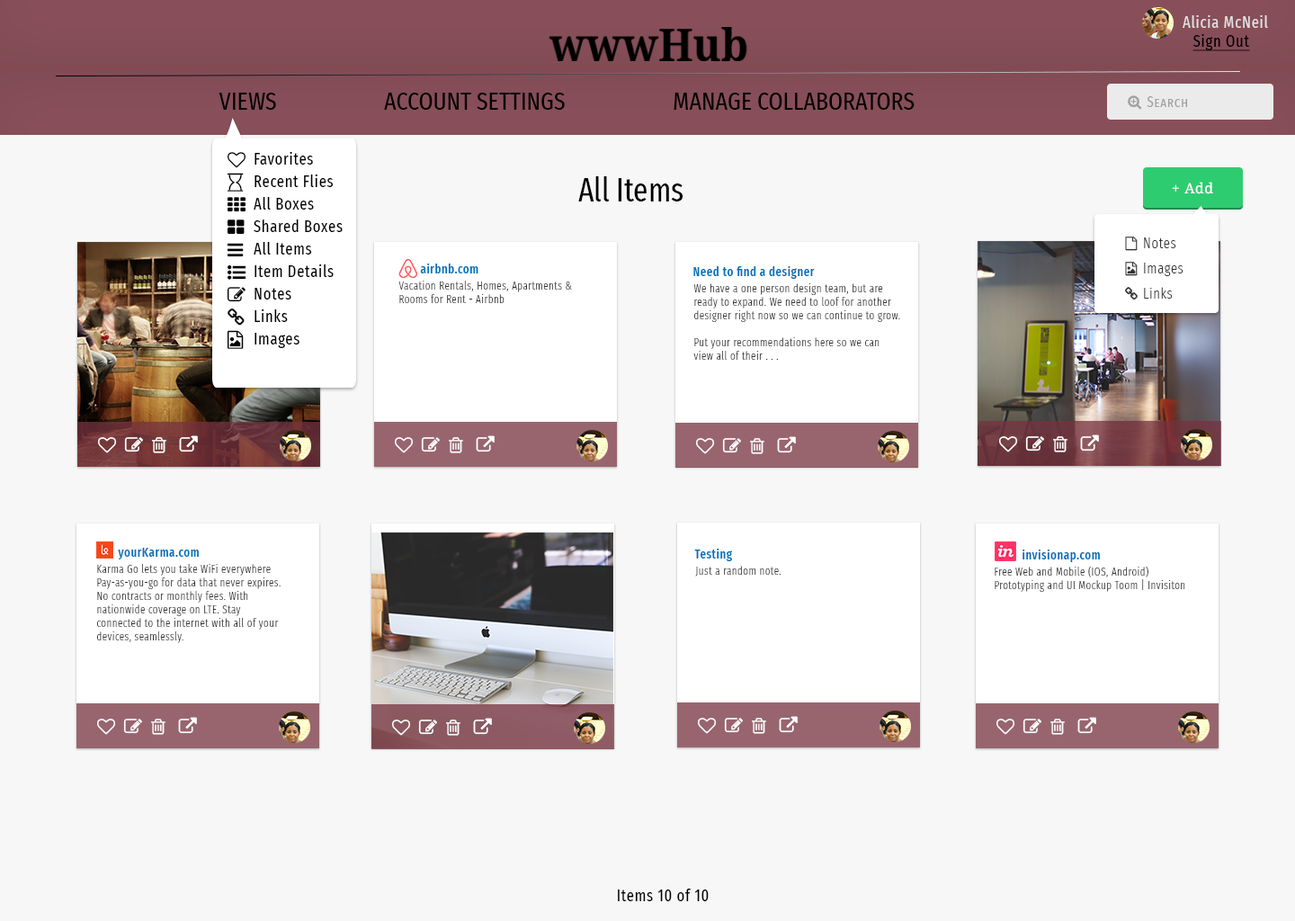
<style>
.page{position:relative;width:1295px;height:921px;background:#f7f7f7}
.page>*{position:absolute;margin:0}
.t1{font:16.2px "FiraSansExtraCondensed-Regular";letter-spacing:0.04em;color:#e2e2e2}
.t2{font:16.2px "FiraSansExtraCondensed-Regular";letter-spacing:0.04em;color:#000000;text-decoration:underline}
.t3{font:25.2px "FiraSansExtraCondensed-Regular";color:#000000;text-transform:uppercase}
.t4{font:14.4px "FiraSansExtraCondensed-Regular";letter-spacing:0.04em;color:#a1a1a1;font-variant:small-caps}
.t5{font:16.2px/22.5px "FiraSansExtraCondensed-Regular";letter-spacing:0.04em;color:#000000}
.t6{font:32.4px "FiraSansExtraCondensed-Regular";color:#000000}
.t7{font:14.4px "DroidSerif";letter-spacing:0.04em;color:#ffffff}
.t8{font:14.4px/25.2px "FiraSansExtraCondensed-Light";letter-spacing:0.04em;color:#333333}
.t9{font:12.6px "FiraSansExtraCondensed-Medium";letter-spacing:0.04em;color:#0072bc}
.t10{font:10.8px/13.5px "FiraSansExtraCondensed-Light";letter-spacing:0.04em;color:#333333}
.t11{font:10.8px "FiraSansExtraCondensed-Light";letter-spacing:0.04em;color:#333333}
.t12{font:16.2px "FiraSansExtraCondensed-Regular";letter-spacing:0.04em;color:#000000}
</style>
<div class="page">
<p class="t1" style="left:1183px;top:15px;width:85px;height:13px">Alicia McNeil</p>
<p class="t2" style="left:1192px;top:34px;width:58px;height:17px">Sign Out</p>
<p class="t3" style="left:219px;top:93px;width:57px;height:17px">Views</p>
<p class="t3" style="left:384px;top:93px;width:181px;height:17px">Account Settings</p>
<p class="t3" style="left:674px;top:93px;width:241px;height:17px">manage collaborators</p>
<p class="t4" style="left:1147px;top:96px;width:41px;height:11px">Search</p>
<p class="t5" style="left:254px;top:152px;width:89px;height:196px">Favorites<br>Recent Flies<br>All Boxes<br>Shared Boxes<br>All Items<br>Item Details<br>Notes<br>Links<br>Images</p>
<p class="t6" style="left:578px;top:176px;width:105px;height:25px">All Items</p>
<p class="t7" style="left:1172px;top:182px;width:41px;height:12px">+ Add</p>
<p class="t8" style="left:1144px;top:237px;width:39px;height:62px">Notes<br>Images<br>Links</p>
<p class="t9" style="left:420px;top:263px;width:58px;height:10px">airbnb.com</p>
<p class="t9" style="left:693px;top:266px;width:122px;height:13px">Need to find a designer</p>
<p class="t10" style="left:398px;top:281px;width:174px;height:22px">Vacation Rentals, Homes, Apartments &amp;<br>Rooms for Rent - Airbnb</p>
<p class="t10" style="left:693px;top:283px;width:207px;height:77px">We have a one person design team, but are <br>ready to expand. We need to loof for another<br>designer right now so we can continue to grow.<br><br>Put your recommendations here so we can<br>view all of their . . .</p>
<p class="t9" style="left:118px;top:548px;width:81px;height:11px">yourKarma.com</p>
<p class="t9" style="left:694px;top:549px;width:38px;height:12px">Testing</p>
<p class="t9" style="left:1022px;top:549px;width:78px;height:13px">invisionap.com</p>
<p class="t10" style="left:97px;top:564px;width:184px;height:79px">Karma Go lets you take WiFi everywhere<br>Pay-as-you-go for data that never expires.<br>No contracts or monthly fees. With <br>nationwide coverage on LTE. Stay<br>connected to the internet with all of your<br>devices, seamlessly.</p>
<p class="t11" style="left:695px;top:566px;width:86px;height:10px">Just a random note.</p>
<p class="t10" style="left:995px;top:566px;width:190px;height:26px">Free Web and Mobile (IOS, Android) <br>Prototyping and UI Mockup Toom | Invisiton</p>
<p class="t12" style="left:618px;top:888px;width:91px;height:13px">Items 10 of 10</p>
</div>
